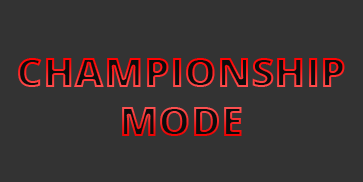
<style>
.page{position:relative;width:363px;height:182px;background:#333333}
.page>*{position:absolute;margin:0}
.t1{font:41px "OpenSans-Extrabold"}
</style>
<div class="page">
<p class="t1" style="left:18px;top:58px;width:327px;height:78px;text-align:center">CHAMPIONSHIP<br>MODE</p>
</div>
